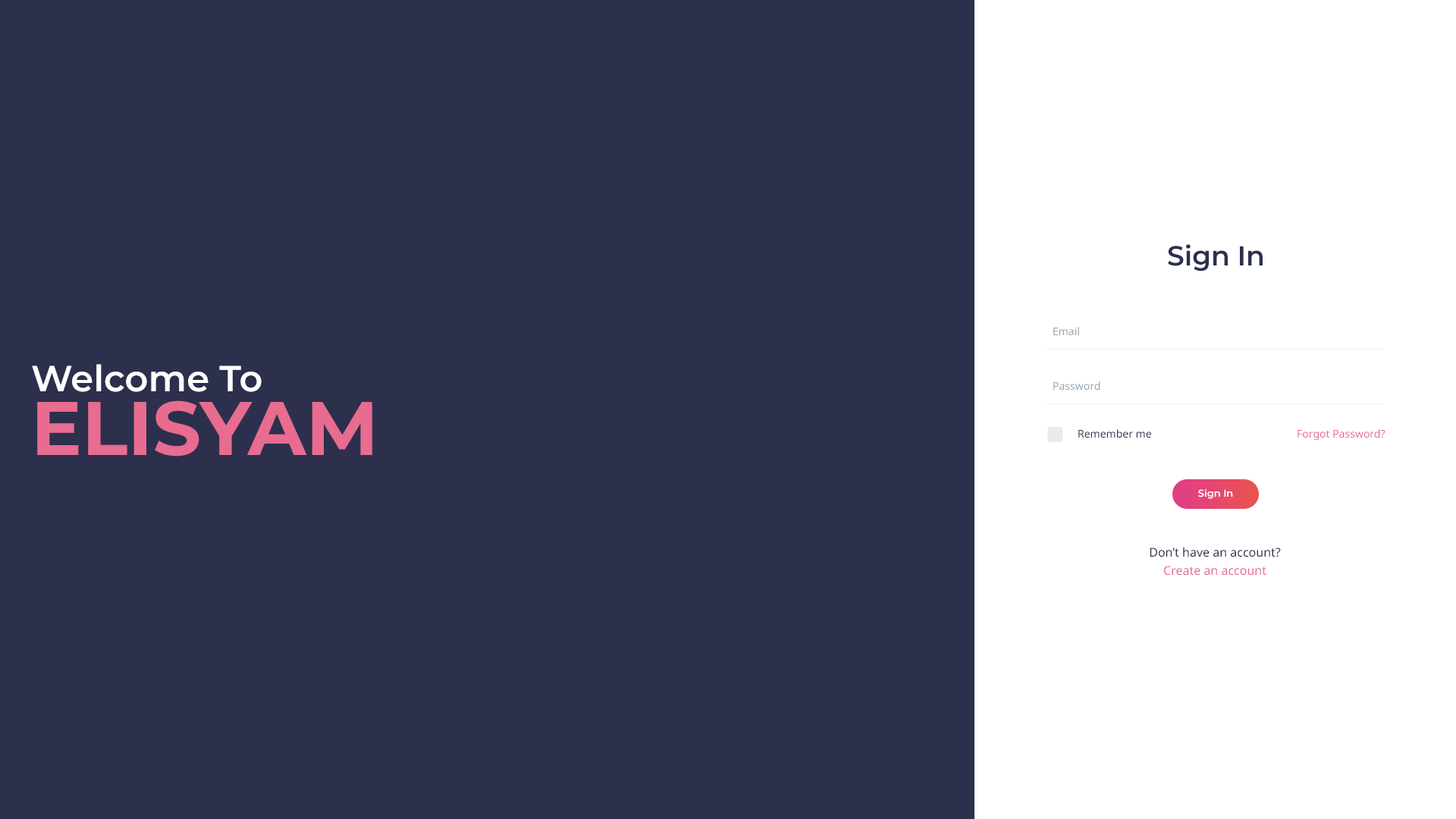
<style>
.page{position:relative;width:1456px;height:819px;background:#2c304d}
.page>*{position:absolute;margin:0}
.t1{font:27.3px "Montserrat-SemiBold";color:#2c304d}
.t2{font:10.6px "NotoSans-Regular";color:#94a4b0}
.t3{font:36.4px "Montserrat-SemiBold";color:#ffffff}
.t4{font:75.8px "Montserrat-Bold";color:#e76c90;text-transform:uppercase}
.t5{font:10.6px "NotoSans-Regular";color:#2c304d}
.t6{font:10.6px "NotoSans-Regular";color:#e76c90}
.t7{font:9.9px "Montserrat-SemiBold";color:#ffffff}
.t8{font:12.1px/18.2px "NotoSans-Regular";color:#2c304d}
.t9{font:12.1px/18.2px "NotoSans-Regular";color:#e76c90}
</style>
<div class="page">
<p class="t1" style="left:1168px;top:244px;width:95px;height:27px">Sign In</p>
<p class="t2" style="left:1053px;top:327px;width:26px;height:9px">Email</p>
<p class="t3" style="left:32px;top:364px;width:230px;height:28px">Welcome To</p>
<p class="t2" style="left:1053px;top:381px;width:47px;height:10px">Password</p>
<p class="t4" style="left:37px;top:400px;width:335px;height:57px">Elisyam</p>
<p class="t5" style="left:1078px;top:429px;width:73px;height:9px">Remember me</p>
<p class="t6" style="left:1297px;top:429px;width:88px;height:12px">Forgot Password?</p>
<p class="t7" style="left:1198px;top:489px;width:35px;height:10px">Sign In</p>
<p class="t8" style="left:1150px;top:547px;width:131px;height:29px;text-align:center">Don’t have an account?<br><span class="t9">Create an account</span></p>
</div>
